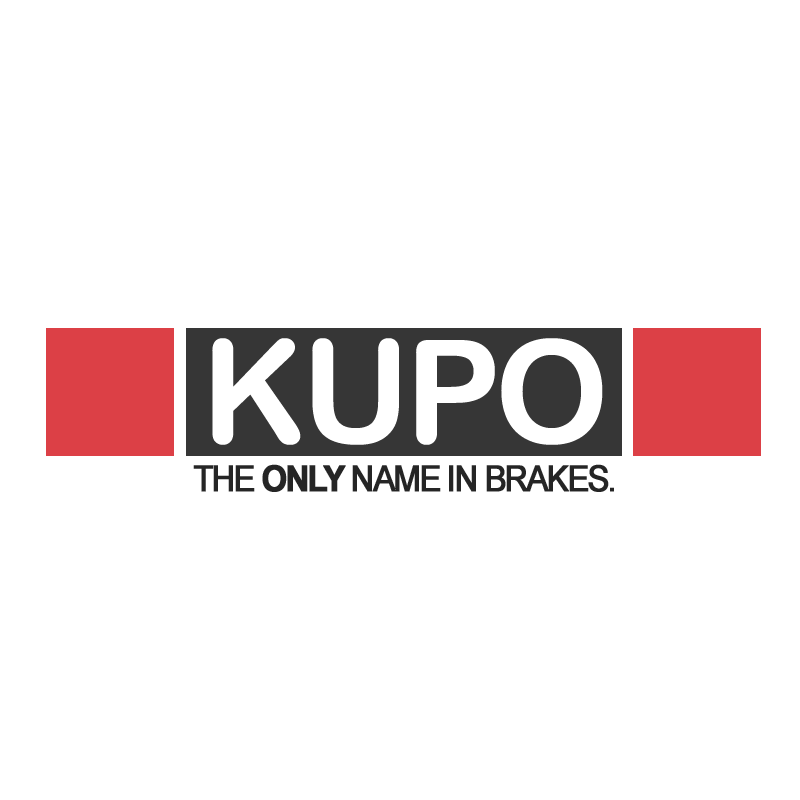
<style>
.page{position:relative;width:800px;height:800px;background:#ffffff}
.page>*{position:absolute;margin:0}
.t1{font:144px "ArialRoundedMTBold";letter-spacing:-0.04em;color:#ffffff}
.t2{font:36px "ArialMT";letter-spacing:-0.08em;color:#252525;font-weight:bold;scale:0.92 1}
.t3{font:36px "Arial-BoldMT";letter-spacing:-0.08em;color:#252525;font-weight:bold;scale:0.92 1}
</style>
<div class="page">
<p class="t1" style="left:212px;top:338px;width:391px;height:107px">KUPO</p>
<p class="t2" style="left:193px;top:464px;width:421px;height:28px">THE <span class="t3">ONLY</span> NAME IN BRAKES.</p>
</div>
